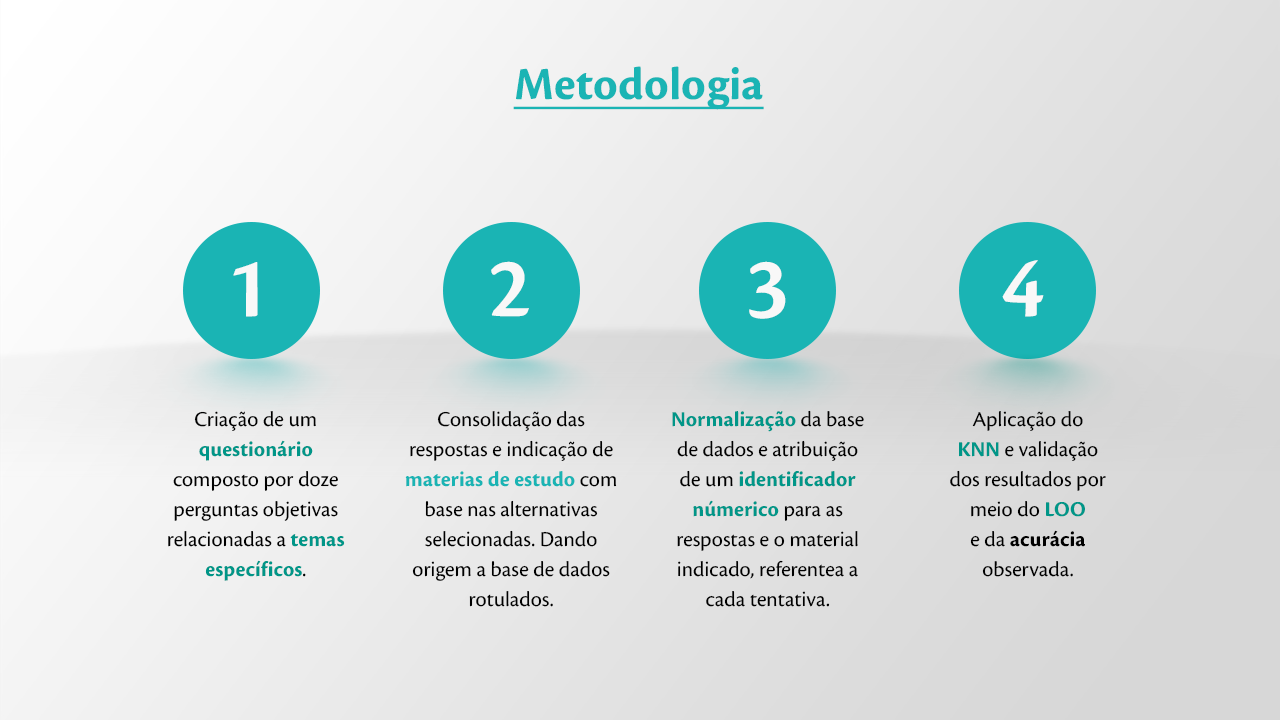
<style>
.page{position:relative;width:1280px;height:720px}
.page>*{position:absolute;margin:0}
.t1{font:48px "CronosPro-Bold";color:#1ab4b4;text-decoration:underline}
.t2{font:89.9px "CronosPro-Semibold";color:#f8f8f8}
.t3{font:22px/30px "CronosPro-Regular";color:#000000}
.t4{font:22px/30px "CronosPro-Bold";color:#009688}
.t5{font:22px/30px "CronosPro-Bold";color:#1ab4b4}
.t6{font:22px/30px "CronosPro-Bold";color:#000000}
</style>
<div class="page">
<p class="t1" style="left:513px;top:66px;width:251px;height:44px">Metodologia</p>
<p class="t2" style="left:233px;top:262px;width:25px;height:55px">1</p>
<p class="t2" style="left:491px;top:261px;width:38px;height:56px">2</p>
<p class="t2" style="left:749px;top:261px;width:37px;height:58px">3</p>
<p class="t2" style="left:1002px;top:260px;width:42px;height:57px">4</p>
<p class="t3" style="left:168px;top:411px;width:177px;height:170px;text-align:center">Criação de um <span class="t4">questionário </span>composto por doze perguntas objetivas relacionadas a <span class="t4">temas específicos</span>.</p>
<p class="t3" style="left:405px;top:411px;width:212px;height:196px;text-align:center">Consolidação das respostas e indicação de <span class="t5">materias de estudo</span> com base nas alternativas selecionadas. Dando origem a base de dados rotulados.</p>
<p class="t3" style="left:672px;top:410px;width:192px;height:197px;text-align:center"><span class="t4">Normalização </span>da base <br>de dados e atribuição <br>de um <span class="t4">identificador númerico</span> para as respostas e o material indicado, referentea a cada tentativa.</p>
<p class="t3" style="left:950px;top:411px;width:156px;height:166px;text-align:center">Aplicação do <br><span class="t4">KNN </span>e validação <br>dos resultados por <br>meio do <span class="t4">LOO <br></span>e da <span class="t6">acurácia </span>observada.</p>
</div>
